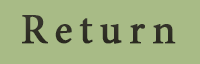
<style>
.page{position:relative;width:200px;height:64px;background:#a8bb86}
.page>*{position:absolute;margin:0}
.t1{font:42px "MinionPro-Regular";letter-spacing:0.15em;color:#2c2b21;font-weight:bold}
</style>
<div class="page">
<p class="t1" style="left:22px;top:15px;width:154px;height:29px">Return</p>
</div>
